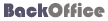
<style>
.page{position:relative;width:108px;height:21px;background:#ffffff}
.page>*{position:absolute;margin:0}
.t1{font:20px "Bauhaus93";color:#7c7777}
.t2{font:20px "Bauhaus93";color:#56546a}
</style>
<div class="page">
<p class="t1" style="left:4px;top:2px;width:101px;height:16px"><span class="t2">Back</span>Office</p>
</div>
